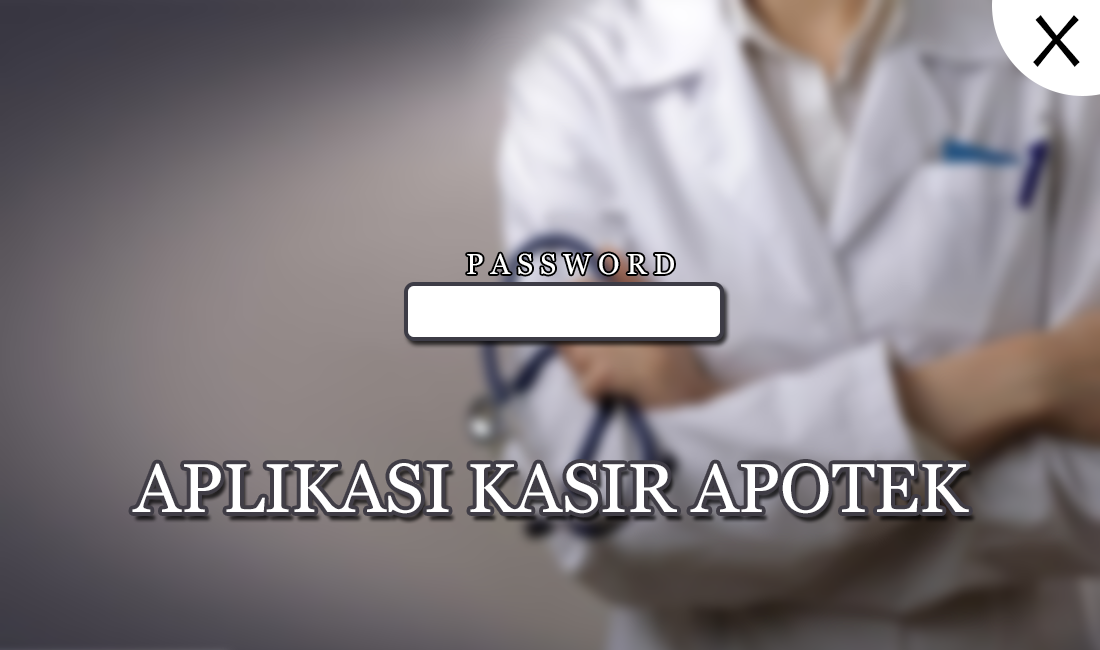
<style>
.page{position:relative;width:1100px;height:650px}
.page>*{position:absolute;margin:0}
.t1{font:72px "LithosPro-Regular";letter-spacing:0.24em;color:#000000}
.t2{font:28.7px "Georgia";letter-spacing:0.24em;color:#ffffff}
.t3{font:68.7px "Georgia";color:#ffffff}
</style>
<div class="page">
<p class="t1" style="left:1033px;top:15px;width:47px;height:52px">X</p>
<p class="t2" style="left:467px;top:253px;width:207px;height:22px">PASSWORD</p>
<p class="t3" style="left:132px;top:463px;width:837px;height:51px">APLIKASI KASIR APOTEK</p>
</div>
